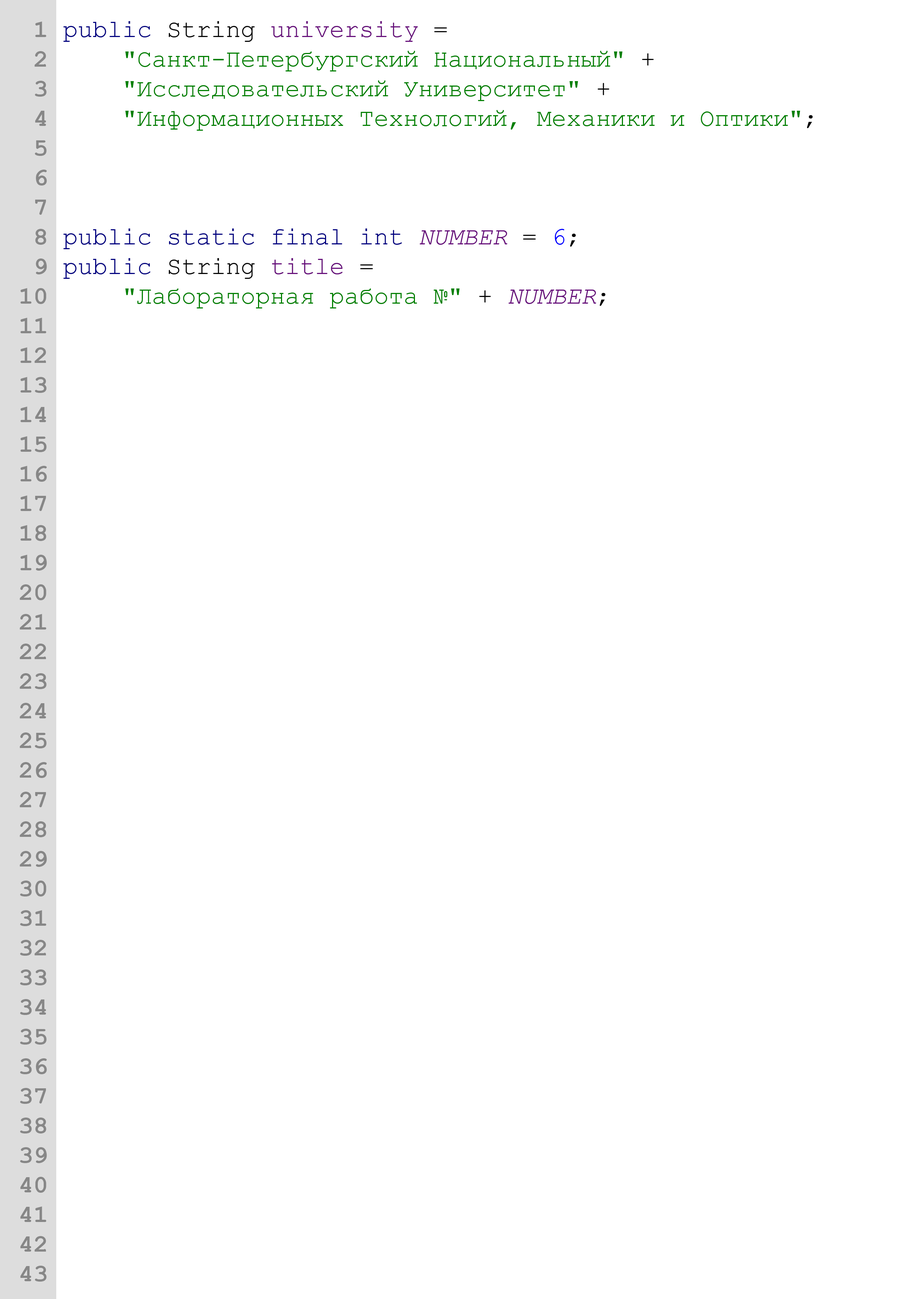
<style>
.page{position:relative;width:918px;height:1299px;background:#ffffff}
.page>*{position:absolute;margin:0}
.t1{font:24.7px "CourierNewPS-BoldMT";color:#878787}
.t2{font:24.7px "CourierNewPSMT";color:#008000}
.t3{font:24.7px "CourierNewPSMT";color:#000080}
.t4{font:24.7px "CourierNewPSMT";color:#030303}
.t5{font:24.7px "CourierNewPSMT";color:#660e7a}
.t6{font:24.7px "CourierNewPSMT";color:#000000}
.t7{font:24.7px "CourierNewPS-ItalicMT";color:#660e7a}
.t8{font:24.7px "CourierNewPSMT";color:#0000ff}
</style>
<div class="page">
<p class="t1" style="left:20px;top:21px;width:27px;height:1260px;text-align:right">1<br>2<br>3<br>4<br>5<br>6<br>7<br>8<br>9<br>10<br>11<br>12<br>13<br>14<br>15<br>16<br>17<br>18<br>19<br>20<br>21<br>22<br>23<br>24<br>25<br>26<br>27<br>28<br>29<br>30<br>31<br>32<br>33<br>34<br>35<br>36<br>37<br>38<br>39<br>40<br>41<br>42<br>43</p>
<p class="t2" style="left:63px;top:21px;width:750px;height:287px"><span class="t3">public </span><span class="t4">String </span><span class="t5">university </span><span class="t4">= <br>    </span>"Санкт-Петербургский Национальный" <span class="t6">+ <br></span>    "Исследовательский Университет" <span class="t6">+<br></span>    "Информационных Технологий, Механики и Оптики"<span class="t6">;<br><br><br><br></span><span class="t3">public static final int </span><span class="t7">NUMBER </span><span class="t4">= </span><span class="t8">6</span><span class="t4">;<br></span><span class="t3">public </span><span class="t4">String </span><span class="t5">title </span><span class="t4">= <br>    </span>"Лабораторная работа №" <span class="t6">+ </span><span class="t7">NUMBER</span><span class="t6">;</span></p>
</div>
